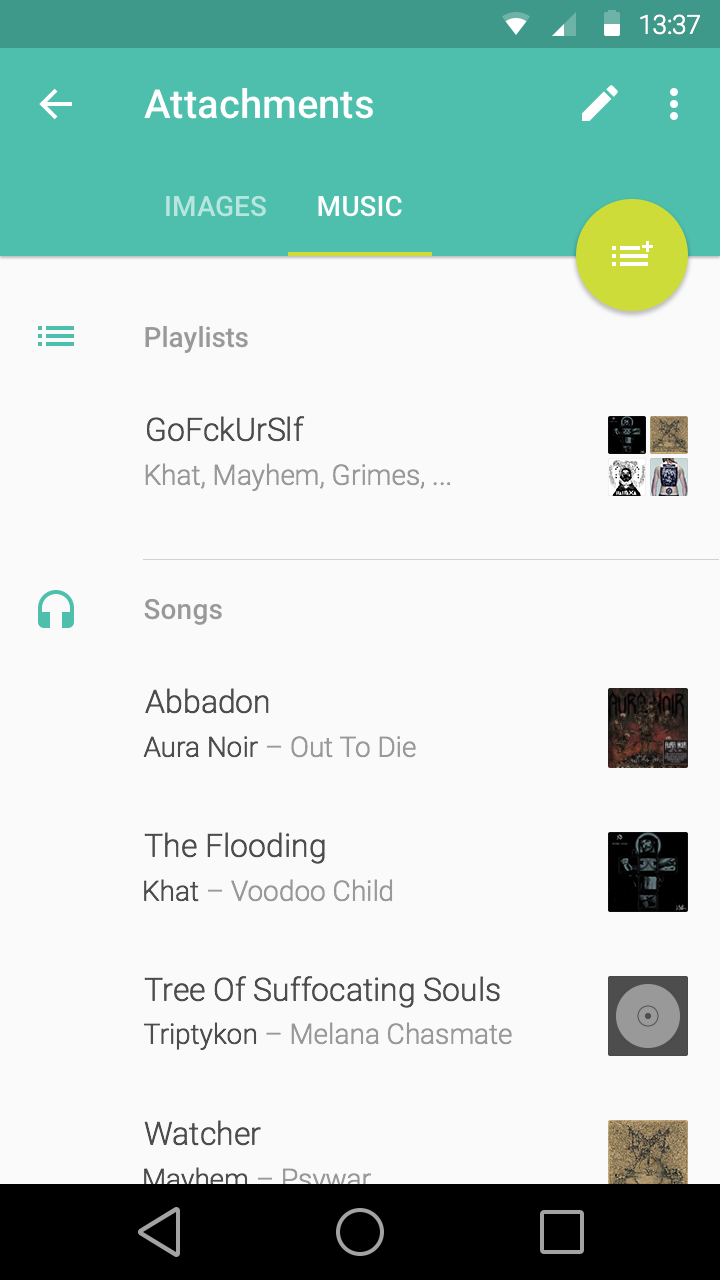
<style>
.page{position:relative;width:720px;height:1280px;background:#fafafa}
.page>*{position:absolute;margin:0}
.t1{font:26.1px "Roboto-Light";color:#ffffff}
.t2{font:40px "Roboto-Medium";color:#ffffff}
.t3{font:28px "Roboto-Medium";color:#b8e5de;text-transform:uppercase}
.t4{font:28px "Roboto-Medium";color:#ffffff;text-transform:uppercase}
.t5{font:28px "Roboto-Medium";color:#999999}
.t6{font:32px "Roboto-Light";color:#4d4d4d}
.t7{font:28px "Roboto-Light";color:#999999}
.t8{font:28px "Roboto-Light";color:#4d4d4d}
</style>
<div class="page">
<p class="t1" style="left:640px;top:14px;width:60px;height:21px">13:37</p>
<p class="t2" style="left:144px;top:88px;width:229px;height:31px">Attachments</p>
<p class="t3" style="left:166px;top:195px;width:100px;height:22px">Images</p>
<p class="t4" style="left:318px;top:195px;width:84px;height:22px">Music</p>
<p class="t5" style="left:145px;top:326px;width:103px;height:27px">Playlists</p>
<p class="t6" style="left:146px;top:416px;width:159px;height:26px">GoFckUrSlf</p>
<p class="t7" style="left:145px;top:463px;width:306px;height:28px">Khat, Mayhem, Grimes, ...</p>
<p class="t5" style="left:144px;top:598px;width:78px;height:27px">Songs</p>
<p class="t6" style="left:145px;top:688px;width:124px;height:26px">Abbadon</p>
<p class="t7" style="left:143px;top:736px;width:273px;height:22px"><span class="t8">Aura Noir</span> – Out To Die</p>
<p class="t6" style="left:144px;top:832px;width:181px;height:32px">The Flooding</p>
<p class="t7" style="left:144px;top:879px;width:249px;height:23px"><span class="t8">Khat </span>– Voodoo Child</p>
<p class="t6" style="left:144px;top:976px;width:356px;height:32px">Tree Of Suffocating Souls</p>
<p class="t7" style="left:143px;top:1022px;width:369px;height:28px"><span class="t8">Triptykon</span> – Melana Chasmate</p>
<p class="t6" style="left:144px;top:1120px;width:117px;height:26px">Watcher</p>
</div>
